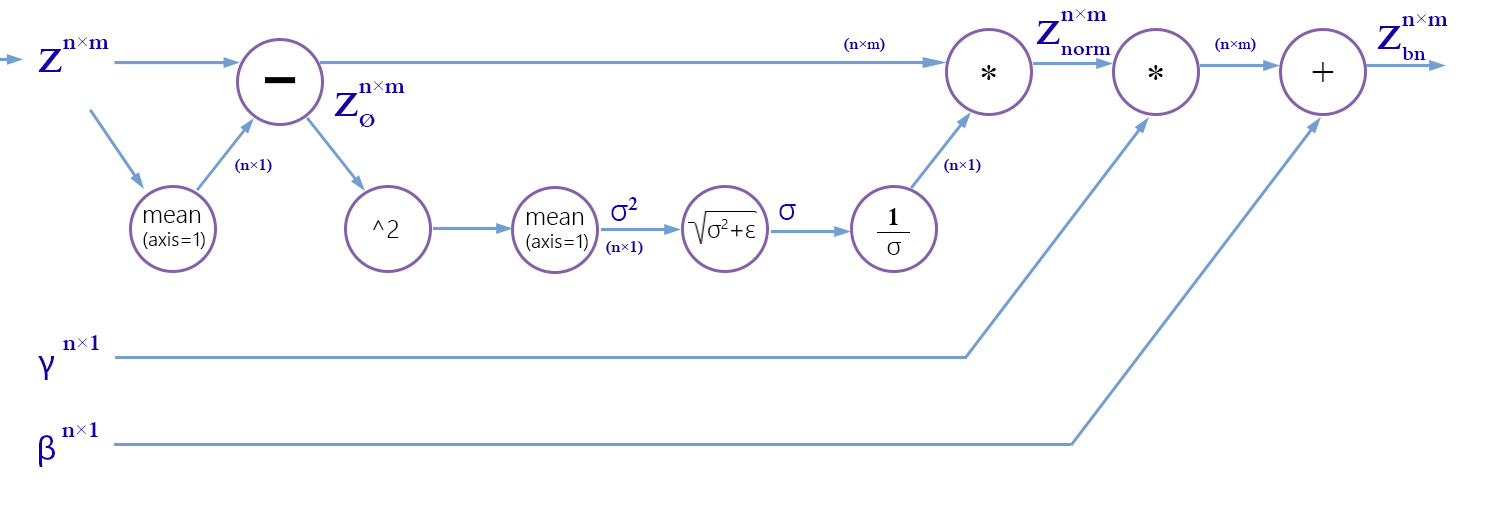
<style>
.page{position:relative;width:1500px;height:510px;background:#ffffff}
.page>*{position:absolute;margin:0}
.t1{font:22.8px "IskoolaPota-Bold";color:#1400a6}
.t2{font:22.8px "TimesNewRomanPSMT";color:#1400a6}
.t3{font:35.1px "IskoolaPota-Bold";color:#1400a6}
.t4{font:15.8px "IskoolaPota-Bold";color:#1400a6}
.t5{font:15.8px "TimesNewRomanPSMT";color:#1400a6}
.t6{font:38.8px "IskoolaPota";color:#000000}
.t7{font:115.3px "SegoeUI-Semilight";color:#000000}
.t8{font:32px "SegoeUI-Semilight";color:#1400a6}
.t9{font:32px "IskoolaPota-Bold";color:#1400a6}
.t10{font:26px/30.9px "IskoolaPota-Bold";color:#000000}
.t11{font:26px/30.9px "SegoeUI-Semilight";color:#000000}
.t12{font:20px/23.8px "SegoeUI-Semilight";color:#000000}
.t13{font:24.6px/23.8px "SegoeUI-Semilight";color:#000000}
.t14{font:24.6px "SegoeUI-Semilight";color:#000000}
.t15{font:35.1px "MyriadPro-Regular";color:#1400a6}
</style>
<div class="page">
<p class="t1" style="left:1061px;top:9px;width:46px;height:12px">n<span class="t2">×</span>m</p>
<p class="t1" style="left:1402px;top:14px;width:46px;height:12px">n<span class="t2">×</span>m</p>
<p class="t3" style="left:1036px;top:21px;width:75px;height:34px">Znorm</p>
<p class="t3" style="left:1377px;top:26px;width:49px;height:34px">Zbn</p>
<p class="t1" style="left:63px;top:37px;width:46px;height:12px">n<span class="t2">×</span>m</p>
<p class="t4" style="left:844px;top:38px;width:41px;height:14px">(n<span class="t5">×m</span>)</p>
<p class="t4" style="left:1215px;top:38px;width:41px;height:14px">(n<span class="t5">×m</span>)</p>
<p class="t3" style="left:38px;top:49px;width:24px;height:23px">Z</p>
<p class="t6" style="left:981px;top:65px;width:15px;height:15px">*</p>
<p class="t6" style="left:1148px;top:65px;width:15px;height:15px">*</p>
<p class="t6" style="left:1312px;top:62px;width:22px;height:20px">+</p>
<p class="t7" style="left:264px;top:77px;width:32px;height:7px">-</p>
<p class="t1" style="left:359px;top:81px;width:46px;height:12px">n<span class="t2">×</span>m</p>
<p class="t3" style="left:334px;top:93px;width:41px;height:34px">ZØ</p>
<p class="t4" style="left:235px;top:159px;width:37px;height:14px">(n<span class="t5">×</span>1)</p>
<p class="t4" style="left:944px;top:159px;width:37px;height:14px">(n<span class="t5">×</span>1)</p>
<p class="t8" style="left:611px;top:197px;width:27px;height:24px">σ<span class="t9">2</span></p>
<p class="t8" style="left:779px;top:204px;width:17px;height:16px">σ</p>
<p class="t10" style="left:887px;top:208px;width:15px;height:47px">1<br><span class="t11">σ</span></p>
<p class="t12" style="left:143px;top:210px;width:62px;height:39px"><span class="t13">mean<br></span>(axis=1)</p>
<p class="t14" style="left:373px;top:220px;width:26px;height:18px">^2</p>
<p class="t12" style="left:526px;top:212px;width:62px;height:39px"><span class="t13">mean<br></span>(axis=1)</p>
<p class="t14" style="left:708px;top:219px;width:48px;height:19px">σ2+ε</p>
<p class="t4" style="left:606px;top:241px;width:37px;height:14px">(n<span class="t5">×</span>1)</p>
<p class="t1" style="left:63px;top:335px;width:36px;height:15px">n<span class="t2">×</span>1</p>
<p class="t15" style="left:38px;top:356px;width:16px;height:24px">γ</p>
<p class="t1" style="left:62px;top:422px;width:36px;height:15px">n<span class="t2">×</span>1</p>
<p class="t15" style="left:39px;top:435px;width:16px;height:32px">β</p>
</div>
